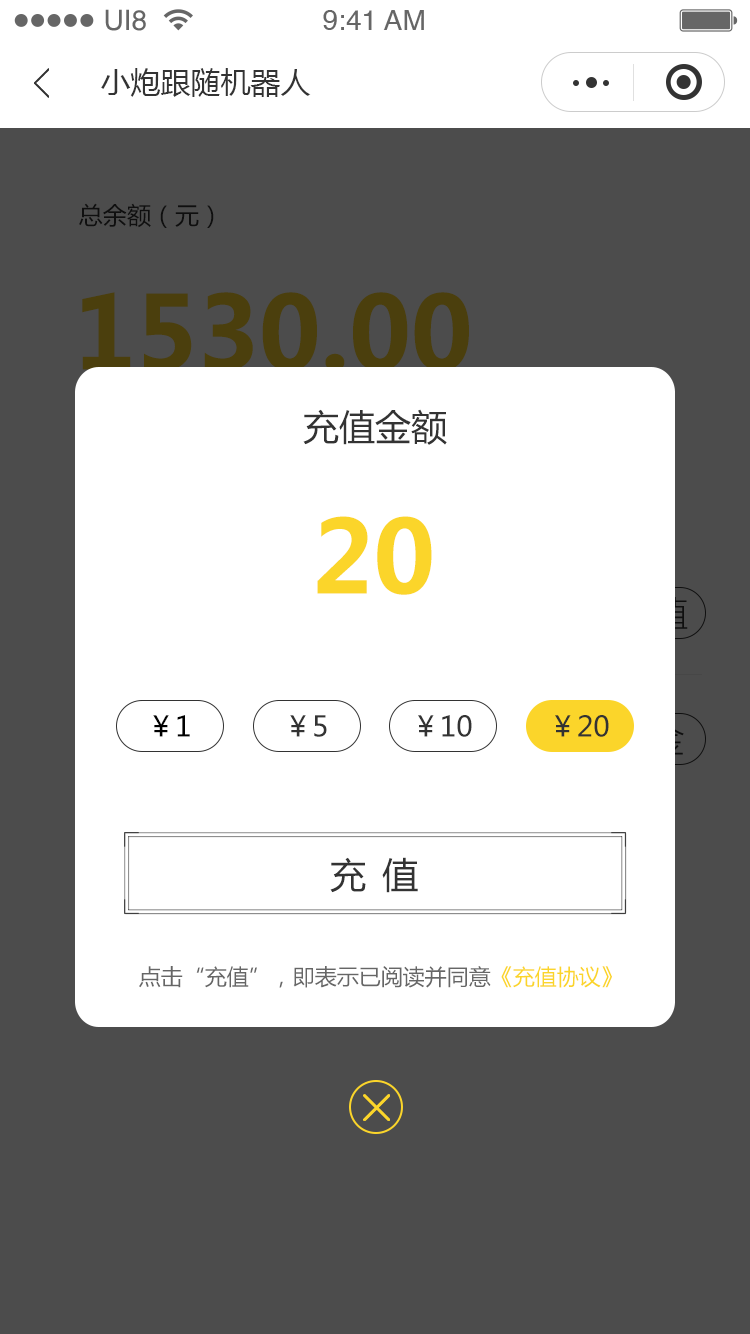
<style>
.page{position:relative;width:750px;height:1334px;background:#4c4c4c}
.page>*{position:absolute;margin:0}
.t1{font:28.1px "Helvetica";color:#666666}
.t2{font:30px "MicrosoftYaHei";color:#333333}
.t3{font:36px "MicrosoftYaHei";color:#333333}
.t4{font:100px "MicrosoftYaHei-Bold";color:#fbd52a}
.t5{font:28px "MicrosoftYaHei";color:#000000}
.t6{font:28px "MicrosoftYaHei";color:#333333}
.t7{font:36px "MicrosoftYaHei";letter-spacing:0.44em;color:#333333}
.t8{font:22px "MicrosoftYaHei";color:#666666}
.t9{font:22px "MicrosoftYaHei";color:#fbd52a}
</style>
<div class="page">
<p class="t1" style="left:105px;top:9px;width:41px;height:22px">UI8</p>
<p class="t1" style="left:323px;top:10px;width:101px;height:20px">9:41 AM</p>
<p class="t2" style="left:101px;top:68px;width:210px;height:29px">小炮跟随机器人</p>
<p class="t3" style="left:303px;top:409px;width:144px;height:36px">充值金额</p>
<p class="t4" style="left:317px;top:516px;width:115px;height:79px">20</p>
<p class="t5" style="left:153px;top:715px;width:37px;height:22px">￥1</p>
<p class="t6" style="left:290px;top:715px;width:37px;height:22px">￥5</p>
<p class="t6" style="left:418px;top:715px;width:54px;height:22px">￥10</p>
<p class="t6" style="left:555px;top:715px;width:54px;height:22px">￥20</p>
<p class="t7" style="left:330px;top:857px;width:88px;height:36px">充值</p>
<p class="t8" style="left:139px;top:966px;width:473px;height:22px">点击“充值”，即表示已阅读并同意<span class="t9">《充值协议》</span></p>
</div>
